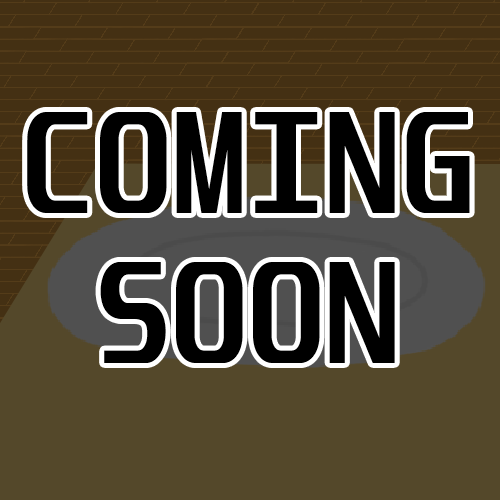
<style>
.page{position:relative;width:500px;height:500px;background:#54482a}
.page>*{position:absolute;margin:0}
.t1{font:125px "Unispace-Bold";color:#000000}
</style>
<div class="page">
<p class="t1" style="left:27px;top:112px;width:443px;height:251px;text-align:center">COMING<br>SOON</p>
</div>
